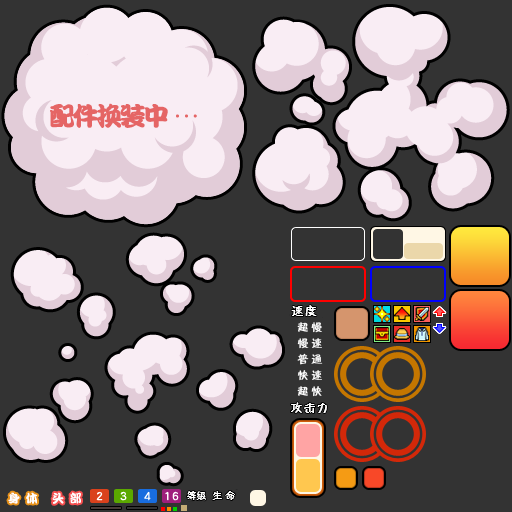
<style>
.page{position:relative;width:512px;height:512px;background:#333333}
.page>*{position:absolute;margin:0}
.t1{font:26px "DFPKanTingLiuW9";letter-spacing:-0.12em;color:#e56565;font-weight:bold}
.t2{font:12px "FZZBHJW--GB1-0";letter-spacing:0.1em;color:#ffffff}
.t3{font:11px "FZZBHJW--GB1-0";color:#ffffff}
.t4{font:12px "DFPKanTingLiuW9";letter-spacing:0.075em;color:#ffffff}
.t5{font:10px "FZZBHJW--GB1-0";color:#ffffff}
</style>
<div class="page">
<p class="t1" style="left:50px;top:103px;width:118px;height:25px">配件换装中</p>
<p class="t2" style="left:291px;top:305px;width:26px;height:11px">速度</p>
<p class="t3" style="left:297px;top:322px;width:25px;height:11px">超 慢</p>
<p class="t3" style="left:297px;top:338px;width:25px;height:11px">慢 速</p>
<p class="t3" style="left:297px;top:353px;width:26px;height:12px">普 通</p>
<p class="t3" style="left:297px;top:370px;width:25px;height:11px">快 速</p>
<p class="t3" style="left:297px;top:386px;width:25px;height:11px">超 快</p>
<p class="t2" style="left:291px;top:402px;width:36px;height:11px">攻击力</p>
<p class="t4" style="left:8px;top:492px;width:30px;height:12px">身 体</p>
<p class="t4" style="left:52px;top:492px;width:29px;height:12px">头 部</p>
<p class="t5" style="left:187px;top:491px;width:19px;height:9px">等级</p>
<p class="t5" style="left:212px;top:491px;width:23px;height:9px">生 命</p>
</div>
